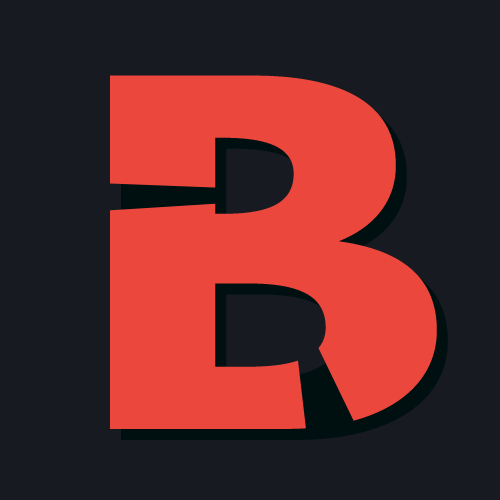
<style>
.page{position:relative;width:500px;height:500px;background:#171a21}
.page>*{position:absolute;margin:0}
.t1{font:428.3px "LeagueSpartan-Bold";color:#ec473d;scale:1.31 1}
</style>
<div class="page">
<p class="t1" style="left:121px;top:86px;width:327px;height:354px">B</p>
</div>
